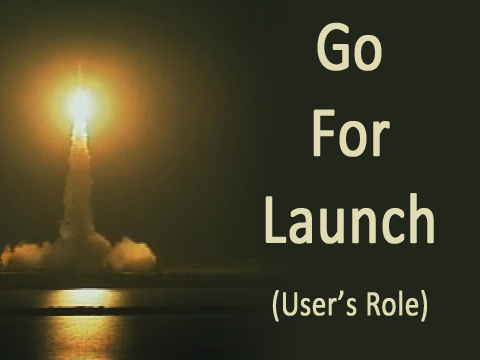
<style>
.page{position:relative;width:480px;height:360px;background:#21251a}
.page>*{position:absolute;margin:0}
.t1{font:72px "Calibri";color:#dfdcb3;font-weight:bold;scale:0.8 1}
.t2{font:36px "Calibri";color:#dfdcb3;font-weight:bold;scale:0.8 1}
</style>
<div class="page">
<p class="t1" style="left:265px;top:22px;width:169px;height:222px;text-align:center">Go<br>For<br>Launch</p>
<p class="t2" style="left:272px;top:290px;width:155px;height:32px">(User’s Role)</p>
</div>
